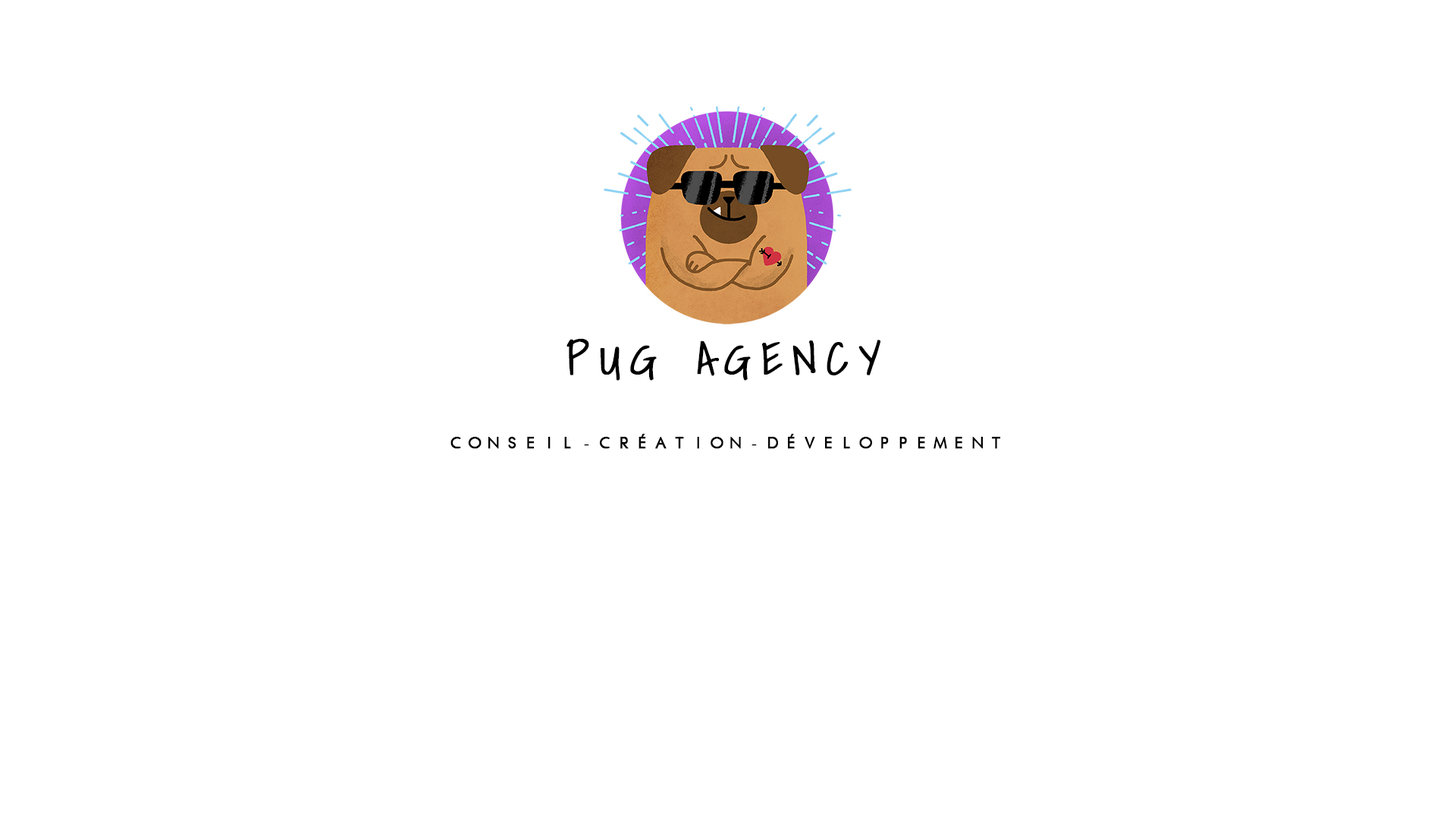
<style>
.page{position:relative;width:1456px;height:819px;background:#ffffff}
.page>*{position:absolute;margin:0}
.t1{font:44.7px "ShadowsIntoLight";letter-spacing:0.2em;color:#000000;text-transform:uppercase;font-weight:bold}
.t2{font:15.2px "FuturistFixedWidth-Regular";letter-spacing:0.2em;color:#000000;text-transform:uppercase;font-weight:bold}
</style>
<div class="page">
<p class="t1" style="left:566px;top:338px;width:314px;height:43px">PUG AGeNCY</p>
<p class="t2" style="left:450px;top:434px;width:550px;height:15px">conseil-création-développement</p>
</div>
